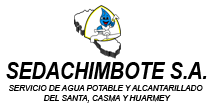
<style>
.page{position:relative;width:212px;height:106px;background:#ffffff}
.page>*{position:absolute;margin:0}
.t1{font:22.9px "Arial-BoldItalicMT";color:#000000;scale:0.85 1}
.t2{font:8px "Arial-ItalicMT";color:#000000}
</style>
<div class="page">
<p class="t1" style="left:6px;top:62px;width:201px;height:17px">SEDACHIMBOTE S.A.</p>
<p class="t2" style="left:9px;top:85px;width:194px;height:18px;text-align:center">SERVICIO DE AGUA POTABLE Y ALCANTARILLADO <br>DEL SANTA, CASMA Y HUARMEY</p>
</div>
